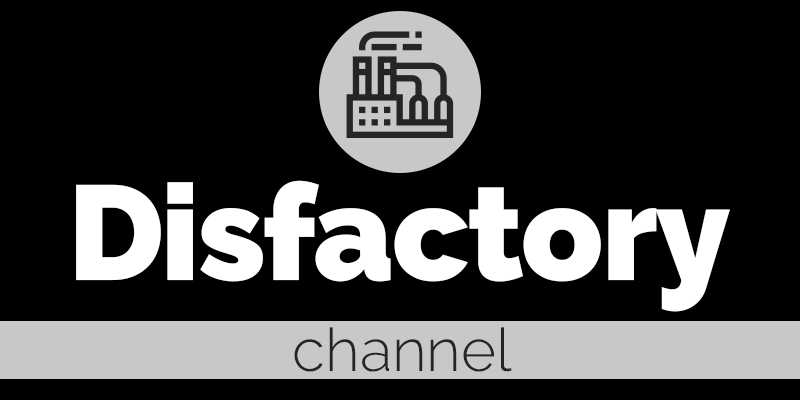
<style>
.page{position:relative;width:800px;height:400px;background:#000000}
.page>*{position:absolute;margin:0}
.t1{font:134px "Raleway-Black";letter-spacing:-0.013em;color:#ffffff}
.t2{font:60px "Raleway-Light";color:#252525}
</style>
<div class="page">
<p class="t1" style="left:76px;top:180px;width:654px;height:132px">Disfactory</p>
<p class="t2" style="left:294px;top:327px;width:218px;height:45px">channel</p>
</div>
